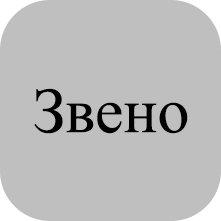
<style>
.page{position:relative;width:221px;height:221px;background:#bfbfbf}
.page>*{position:absolute;margin:0}
.t1{font:63.9px "TimesNewRomanPSMT";color:#000000}
</style>
<div class="page">
<p class="t1" style="left:34px;top:88px;width:154px;height:46px">Звено</p>
</div>
